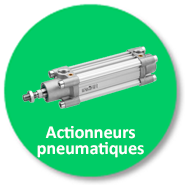
<style>
.page{position:relative;width:185px;height:185px;background:#00cc66}
.page>*{position:absolute;margin:0}
.t1{font:18px/16px "Calibri-Bold";color:#ffffff}
</style>
<div class="page">
<p class="t1" style="left:37px;top:126px;width:107px;height:32px;text-align:center">Actionneurs  <br>pneumatiques</p>
</div>
